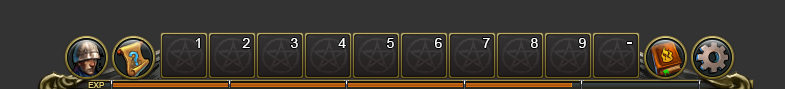
<style>
.page{position:relative;width:785px;height:89px;background:#333333}
.page>*{position:absolute;margin:0}
.t1{font:14px "ArialMT";color:#ffffff}
.t2{font:19.7px "Arial-BoldMT";scale:0.84 1}
.t3{font:18px "ArialMT";color:#ffffff}
.t4{font:8px "ArialMT";color:#dcca7f}
</style>
<div class="page">
<p class="t1" style="left:195px;top:38px;width:5px;height:10px">1</p>
<p class="t1" style="left:242px;top:38px;width:8px;height:10px">2</p>
<p class="t1" style="left:291px;top:38px;width:7px;height:10px">3</p>
<p class="t1" style="left:338px;top:38px;width:8px;height:10px">4</p>
<p class="t1" style="left:387px;top:38px;width:7px;height:10px">5</p>
<p class="t1" style="left:435px;top:38px;width:7px;height:10px">6</p>
<p class="t1" style="left:483px;top:38px;width:7px;height:10px">7</p>
<p class="t1" style="left:531px;top:38px;width:7px;height:10px">8</p>
<p class="t1" style="left:579px;top:38px;width:7px;height:10px">9</p>
<p class="t2" style="left:129px;top:51px;width:10px;height:15px;rotate:-9deg">?</p>
<p class="t3" style="left:627px;top:42px;width:5px;height:2px">-</p>
<p class="t4" style="left:88px;top:82px;width:17px;height:6px">EXP</p>
</div>
